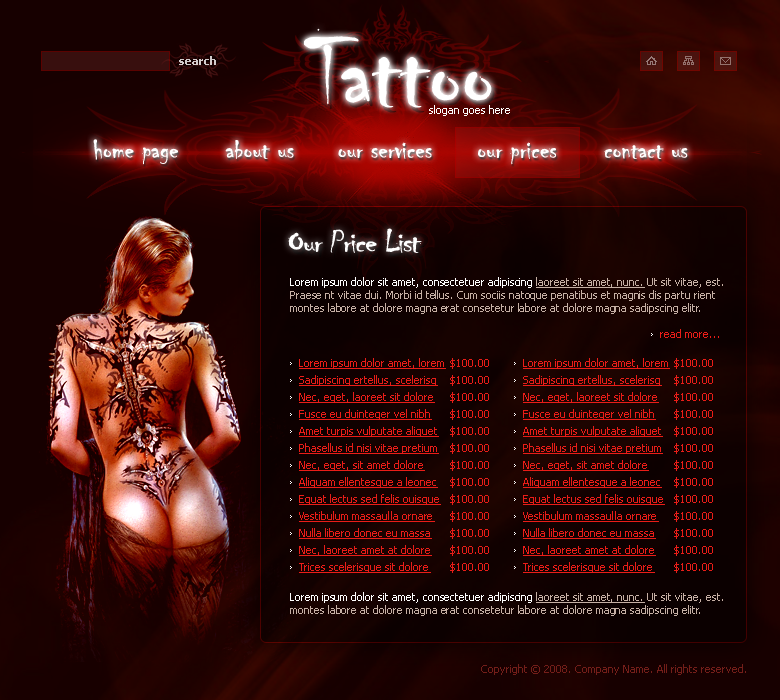
<style>
.page{position:relative;width:780px;height:700px}
.page>*{position:absolute;margin:0}
.t1{font:103.5px "Chiller-Regular";color:#ffffff}
.t2{font:11px "Tahoma-Bold";color:#d1cccc}
.t3{font:11px "Tahoma";color:#ffffff}
.t4{font:28px "Chiller-Regular";color:#ffffff}
.t5{font:32px "Chiller-Regular";letter-spacing:-0.04em;color:#ffffff;scale:1.14 1}
.t6{font:11px/13px "Tahoma";color:#c6b0a5}
.t7{font:11px/13px "Tahoma";color:#ffffff}
.t8{font:11px/13px "Tahoma";color:#c6b0a5;text-decoration:underline}
.t9{font:11px "Tahoma";color:#ea1d18}
.t10{font:11px "Tahoma";color:#ea1d18;text-decoration:underline}
.t11{font:11px "Tahoma";color:#741e19}
</style>
<div class="page">
<p class="t1" style="left:303px;top:28px;width:189px;height:80px">Tattoo</p>
<p class="t2" style="left:179px;top:56px;width:37px;height:9px">search</p>
<p class="t3" style="left:429px;top:105px;width:81px;height:11px">slogan goes here</p>
<p class="t4" style="left:93px;top:139px;width:85px;height:26px">home page</p>
<p class="t4" style="left:225px;top:140px;width:69px;height:19px">about us</p>
<p class="t4" style="left:338px;top:142px;width:94px;height:17px">our services</p>
<p class="t4" style="left:478px;top:142px;width:79px;height:23px">our prices</p>
<p class="t4" style="left:604px;top:145px;width:84px;height:14px">contact us</p>
<p class="t5" style="left:288px;top:228px;width:134px;height:25px">Our Price List</p>
<p class="t6" style="left:290px;top:277px;width:433px;height:37px"><span class="t7">Lorem ipsum dolor sit amet, consectetuer adipiscing </span><span class="t8">laoreet sit amet, nunc.</span> Ut sit vitae, est. Praese nt vitae dui. Morbi id tellus. Cum sociis natoque penatibus et magnis dis partu rient montes labore at dolore magna erat consetetur labore at dolore magna sadipscing elitr.</p>
<p class="t9" style="left:660px;top:329px;width:59px;height:9px">read more...</p>
<p class="t10" style="left:299px;top:358px;width:147px;height:11px">Lorem ipsum dolor amet, lorem</p>
<p class="t9" style="left:450px;top:358px;width:39px;height:11px">$100.00</p>
<p class="t10" style="left:523px;top:358px;width:147px;height:11px">Lorem ipsum dolor amet, lorem</p>
<p class="t9" style="left:674px;top:358px;width:39px;height:11px">$100.00</p>
<p class="t10" style="left:299px;top:375px;width:139px;height:11px">Sadipiscing ertellus, scelerisq</p>
<p class="t9" style="left:450px;top:375px;width:39px;height:11px">$100.00</p>
<p class="t10" style="left:523px;top:375px;width:139px;height:11px">Sadipiscing ertellus, scelerisq</p>
<p class="t9" style="left:674px;top:375px;width:39px;height:11px">$100.00</p>
<p class="t10" style="left:299px;top:392px;width:136px;height:11px">Nec, eget, laoreet sit dolore</p>
<p class="t9" style="left:450px;top:392px;width:39px;height:11px">$100.00</p>
<p class="t10" style="left:523px;top:392px;width:136px;height:11px">Nec, eget, laoreet sit dolore</p>
<p class="t9" style="left:674px;top:392px;width:39px;height:11px">$100.00</p>
<p class="t10" style="left:299px;top:409px;width:133px;height:11px">Fusce eu duinteger vel nibh</p>
<p class="t9" style="left:450px;top:409px;width:39px;height:11px">$100.00</p>
<p class="t10" style="left:523px;top:409px;width:133px;height:11px">Fusce eu duinteger vel nibh</p>
<p class="t9" style="left:674px;top:409px;width:39px;height:11px">$100.00</p>
<p class="t10" style="left:299px;top:426px;width:140px;height:11px">Amet turpis vulputate aliquet</p>
<p class="t9" style="left:450px;top:426px;width:39px;height:11px">$100.00</p>
<p class="t10" style="left:523px;top:426px;width:140px;height:11px">Amet turpis vulputate aliquet</p>
<p class="t9" style="left:674px;top:426px;width:39px;height:11px">$100.00</p>
<p class="t10" style="left:299px;top:443px;width:140px;height:11px">Phasellus id nisi vitae pretium</p>
<p class="t9" style="left:450px;top:443px;width:39px;height:11px">$100.00</p>
<p class="t10" style="left:523px;top:443px;width:140px;height:11px">Phasellus id nisi vitae pretium</p>
<p class="t9" style="left:674px;top:443px;width:39px;height:11px">$100.00</p>
<p class="t10" style="left:299px;top:460px;width:126px;height:11px">Nec, eget, sit amet dolore</p>
<p class="t9" style="left:450px;top:460px;width:39px;height:11px">$100.00</p>
<p class="t10" style="left:523px;top:460px;width:126px;height:11px">Nec, eget, sit amet dolore</p>
<p class="t9" style="left:674px;top:460px;width:39px;height:11px">$100.00</p>
<p class="t10" style="left:299px;top:477px;width:139px;height:11px">Aliquam ellentesque a leonec</p>
<p class="t9" style="left:450px;top:477px;width:39px;height:11px">$100.00</p>
<p class="t10" style="left:523px;top:477px;width:139px;height:11px">Aliquam ellentesque a leonec</p>
<p class="t9" style="left:674px;top:477px;width:39px;height:11px">$100.00</p>
<p class="t10" style="left:299px;top:494px;width:142px;height:11px">Equat lectus sed felis ouisque</p>
<p class="t9" style="left:450px;top:494px;width:39px;height:11px">$100.00</p>
<p class="t10" style="left:523px;top:494px;width:142px;height:11px">Equat lectus sed felis ouisque</p>
<p class="t9" style="left:674px;top:494px;width:39px;height:11px">$100.00</p>
<p class="t10" style="left:299px;top:511px;width:136px;height:11px">Vestibulum massaulla ornare</p>
<p class="t9" style="left:450px;top:511px;width:39px;height:11px">$100.00</p>
<p class="t10" style="left:523px;top:511px;width:136px;height:11px">Vestibulum massaulla ornare</p>
<p class="t9" style="left:674px;top:511px;width:39px;height:11px">$100.00</p>
<p class="t10" style="left:299px;top:528px;width:133px;height:11px">Nulla libero donec eu massa</p>
<p class="t9" style="left:450px;top:528px;width:39px;height:11px">$100.00</p>
<p class="t10" style="left:523px;top:528px;width:133px;height:11px">Nulla libero donec eu massa</p>
<p class="t9" style="left:674px;top:528px;width:39px;height:11px">$100.00</p>
<p class="t10" style="left:299px;top:545px;width:133px;height:11px">Nec, laoreet amet at dolore</p>
<p class="t9" style="left:450px;top:545px;width:39px;height:11px">$100.00</p>
<p class="t10" style="left:523px;top:545px;width:133px;height:11px">Nec, laoreet amet at dolore</p>
<p class="t9" style="left:674px;top:545px;width:39px;height:11px">$100.00</p>
<p class="t10" style="left:299px;top:562px;width:132px;height:11px">Trices scelerisque sit dolore</p>
<p class="t9" style="left:450px;top:562px;width:39px;height:11px">$100.00</p>
<p class="t10" style="left:523px;top:562px;width:132px;height:11px">Trices scelerisque sit dolore</p>
<p class="t9" style="left:674px;top:562px;width:39px;height:11px">$100.00</p>
<p class="t6" style="left:290px;top:592px;width:433px;height:24px"><span class="t7">Lorem ipsum dolor sit amet, consectetuer adipiscing </span><span class="t8">laoreet sit amet, nunc.</span> Ut sit vitae, est. montes labore at dolore magna erat consetetur labore at dolore magna sadipscing elitr.</p>
<p class="t11" style="left:481px;top:664px;width:265px;height:11px">Copyright © 2008. Company Name. All rights reserved.</p>
</div>
